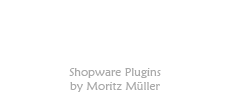
<style>
.page{position:relative;width:230px;height:100px;background:#ffffff}
.page>*{position:absolute;margin:0}
.t1{font:12px "MaiandraGD-Regular";color:#a9a9a9}
</style>
<div class="page">
<p class="t1" style="left:69px;top:68px;width:92px;height:24px;text-align:center">Shopware Plugins<br>by Moritz Müller</p>
</div>
